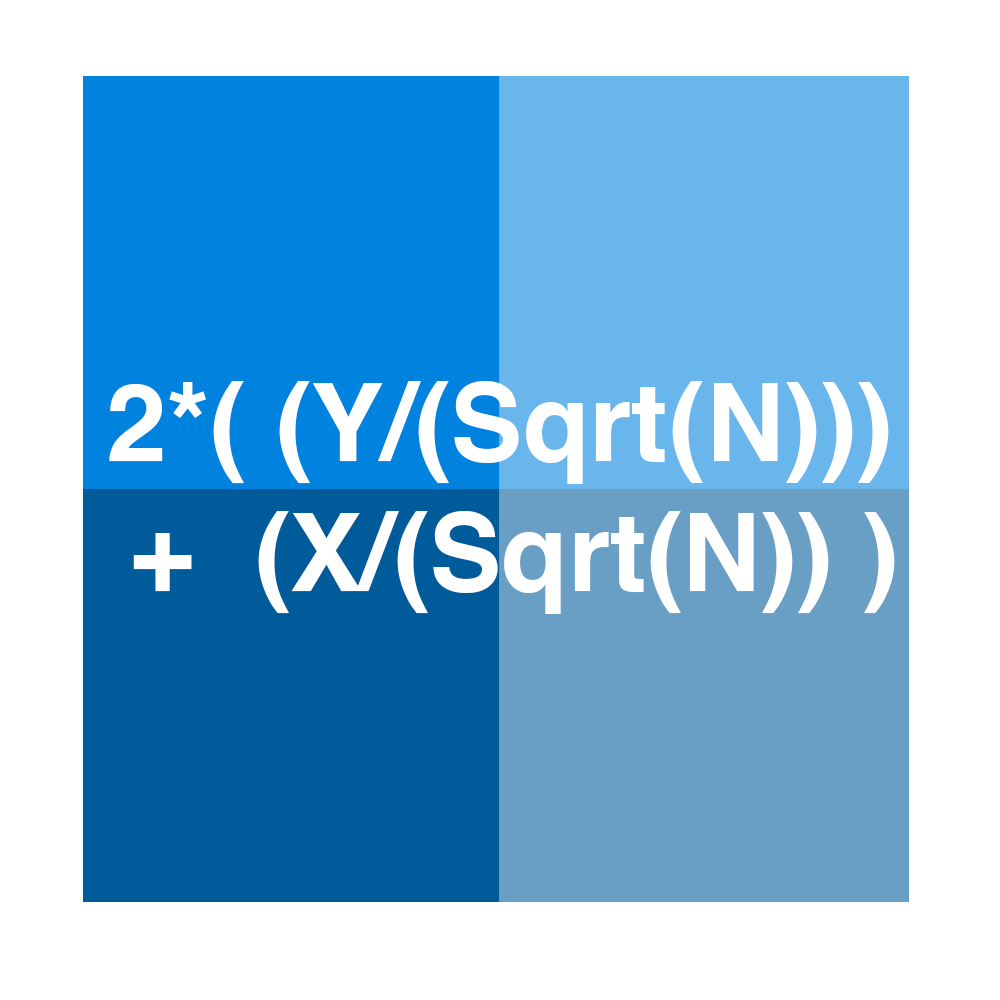
<style>
.page{position:relative;width:1000px;height:1000px;background:#ffffff}
.page>*{position:absolute;margin:0}
.t1{font:108.7px "Helvetica-Bold";color:#ffffff}
</style>
<div class="page">
<p class="t1" style="left:109px;top:381px;width:786px;height:233px;text-align:center">2*( (Y/(Sqrt(N))) <br>   +  (X/(Sqrt(N)) )</p>
</div>
